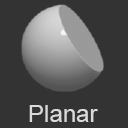
<style>
.page{position:relative;width:128px;height:128px;background:#333333}
.page>*{position:absolute;margin:0}
.t1{font:24px "ArialMT";color:#dadada}
</style>
<div class="page">
<p class="t1" style="left:29px;top:105px;width:69px;height:17px">Planar</p>
</div>
